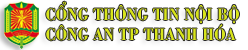
<style>
.page{position:relative;width:248px;height:50px;background:#ffffff}
.page>*{position:absolute;margin:0}
.t1{font:17px "VNI-Bodon-Bold";color:#d8e51a;scale:0.88 1}
</style>
<div class="page">
<p class="t1" style="left:46px;top:1px;width:193px;height:40px">COÅNG THOÂNG TIN NOÄI BOÄ<br>COÂNG AN TP THANH HOÙA</p>
</div>
